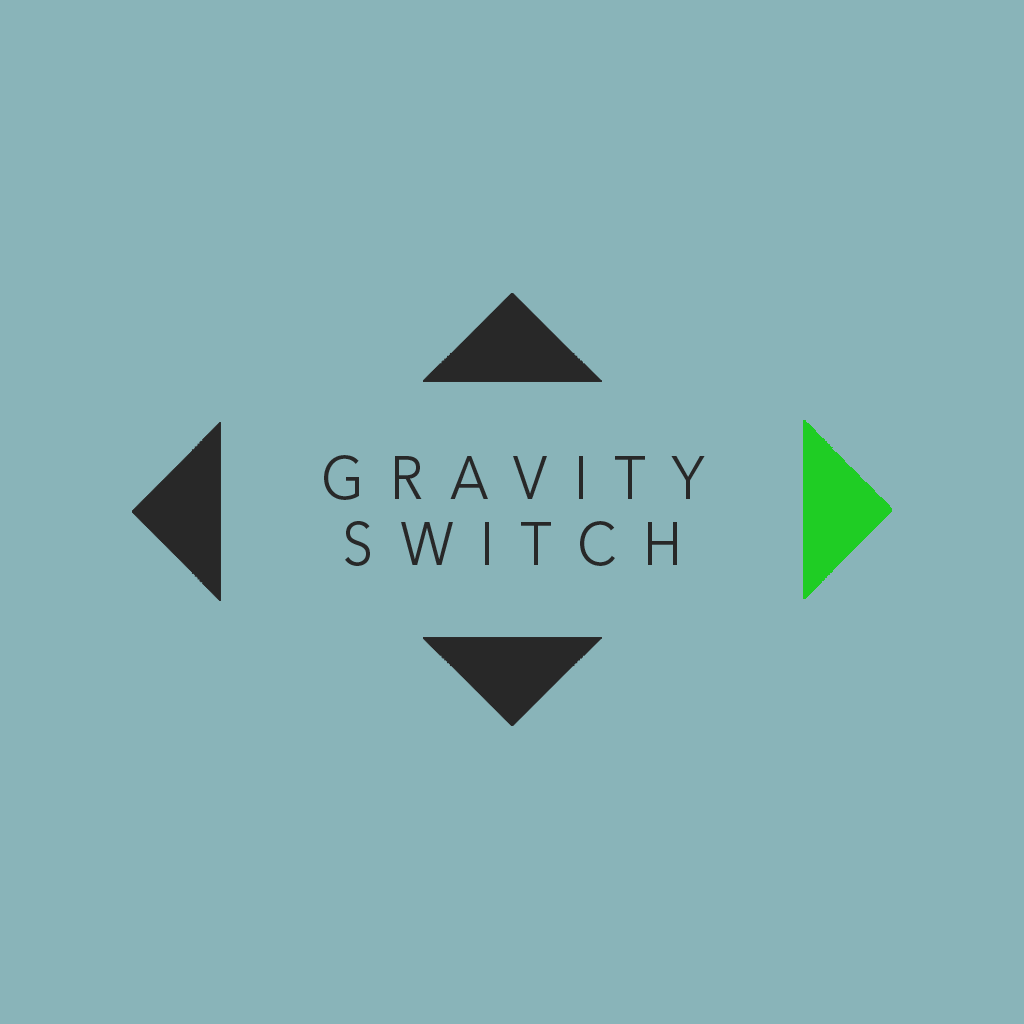
<style>
.page{position:relative;width:1024px;height:1024px;background:#89b4b9}
.page>*{position:absolute;margin:0}
.t1{font:60.5px "AvenirNextLTPro-Regular";letter-spacing:0.48em;color:#282828;scale:0.91 1}
</style>
<div class="page">
<p class="t1" style="left:324px;top:455px;width:381px;height:111px;text-align:center">GRAVITY<br>SWITCH</p>
</div>
